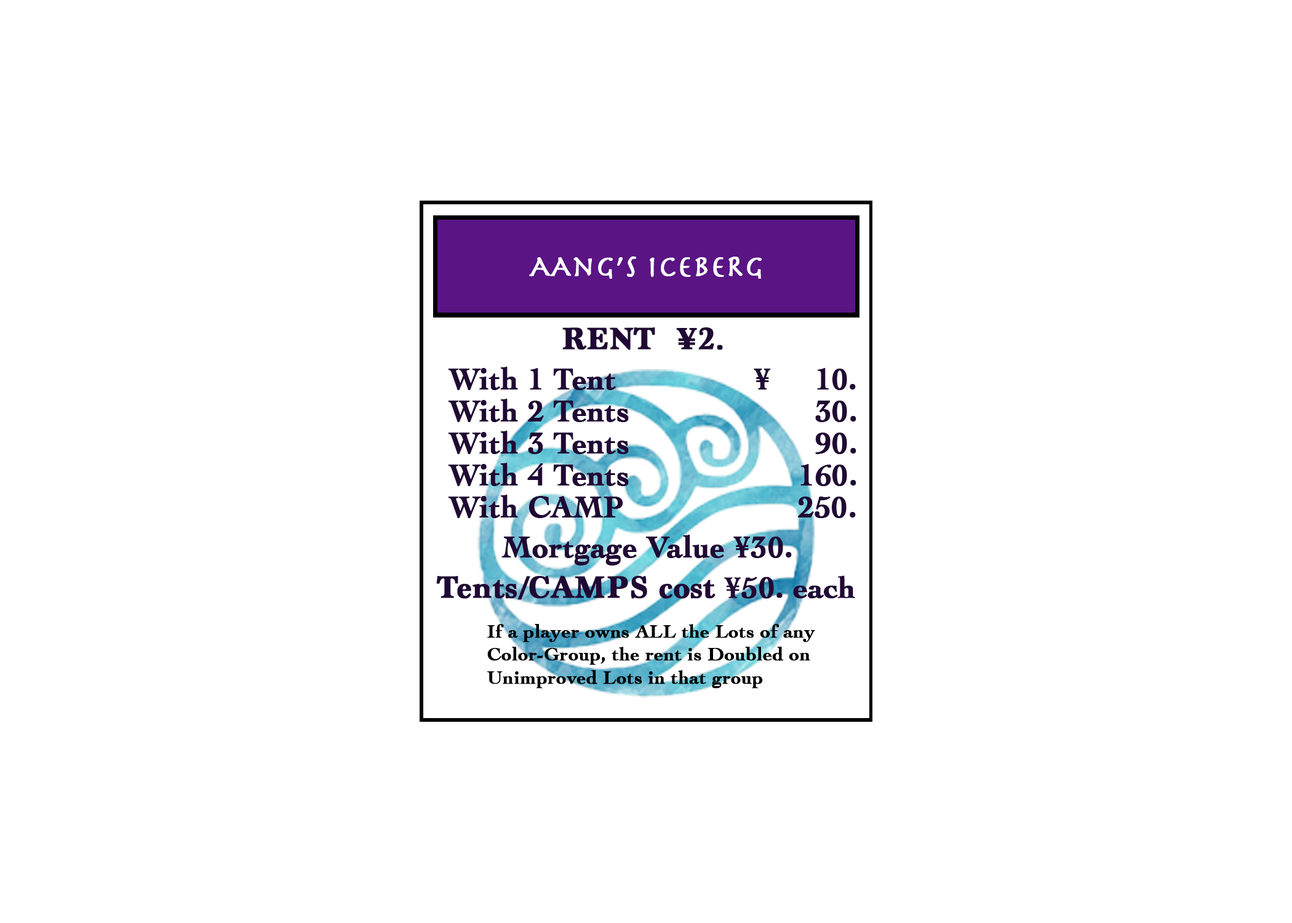
<style>
.page{position:relative;width:1292px;height:923px;background:#ffffff}
.page>*{position:absolute;margin:0}
.t1{font:30.8px "Herculanum";color:#ffffff;font-weight:bold}
.t2{font:32px "Marion-Bold";color:#200834;font-weight:bold}
.t3{font:30.8px "Cochin-Bold";color:#200834;font-weight:bold}
.t4{font:19.2px "Cochin-Bold";color:#000000;font-weight:bold}
</style>
<div class="page">
<p class="t1" style="left:529px;top:256px;width:233px;height:23px">AAng’s icebeRg</p>
<p class="t2" style="left:562px;top:327px;width:161px;height:23px">RENT  ¥2.</p>
<p class="t3" style="left:448px;top:367px;width:408px;height:23px">With 1 Tent               ¥     10.</p>
<p class="t3" style="left:448px;top:399px;width:408px;height:23px">With 2 Tents                     30.</p>
<p class="t3" style="left:448px;top:431px;width:408px;height:23px">With 3 Tents                     90.</p>
<p class="t3" style="left:448px;top:463px;width:408px;height:23px">With 4 Tents                   160.</p>
<p class="t3" style="left:448px;top:495px;width:408px;height:23px">With CAMP                  250.</p>
<p class="t3" style="left:501px;top:535px;width:291px;height:30px">Mortgage Value ¥30.</p>
<p class="t2" style="left:436px;top:575px;width:419px;height:25px">Tents/CAMPS cost <span class="t3">¥50. each</span></p>
<p class="t4" style="left:487px;top:624px;width:328px;height:64px">If a player owns ALL the Lots of any <br>Color-Group, the rent is Doubled on <br>Unimproved Lots in that group</p>
</div>
